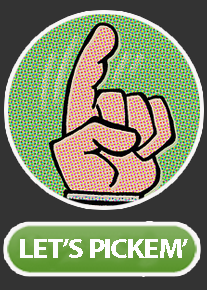
<style>
.page{position:relative;width:207px;height:290px;background:#333333}
.page>*{position:absolute;margin:0}
.t1{font:27px "MyriadPro-Bold";letter-spacing:-0.05em;color:#fdfdfd;text-transform:uppercase;scale:1.1 1}
</style>
<div class="page">
<p class="t1" style="left:20px;top:239px;width:168px;height:19px">let’s pickem’</p>
</div>
